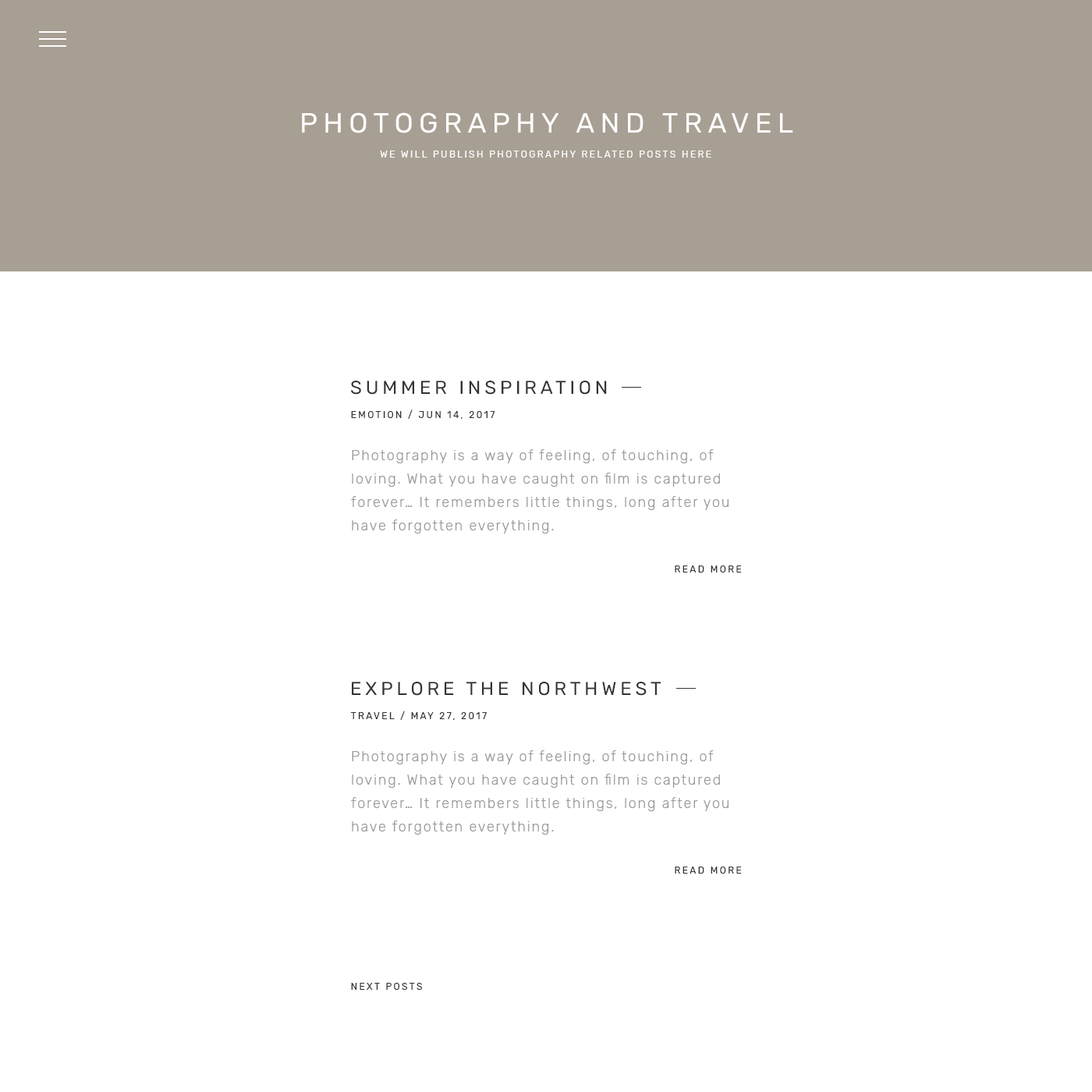
<style>
.page{position:relative;width:1092px;height:1092px;background:#ffffff}
.page>*{position:absolute;margin:0}
.t1{font:28.1px "Rubik-Regular";letter-spacing:0.2em;color:#fffefe;text-transform:uppercase}
.t2{font:9.4px "Rubik-Regular";letter-spacing:0.2em;color:#ffffff;text-transform:uppercase}
.t3{font:18.7px "Rubik-Regular";letter-spacing:0.2em;color:#333333;text-transform:uppercase}
.t4{font:9.4px "Rubik-Regular";letter-spacing:0.2em;color:#333333;text-transform:uppercase}
.t5{font:14px/23.4px "Rubik-Light";letter-spacing:0.1em;color:#999999}
</style>
<div class="page">
<p class="t1" style="left:302px;top:112px;width:491px;height:21px">Photography and Travel</p>
<p class="t2" style="left:380px;top:151px;width:331px;height:7px">We will Publish photography related posts here</p>
<p class="t3" style="left:351px;top:381px;width:256px;height:14px">Summer Inspiration</p>
<p class="t4" style="left:351px;top:409px;width:144px;height:10px">Emotion / Jun 14, 2017</p>
<p class="t5" style="left:351px;top:449px;width:378px;height:85px">Photography is a way of feeling, of touching, of loving. What you have caught on film is captured forever… It remembers little things, long after you have forgotten everything.</p>
<p class="t4" style="left:675px;top:565px;width:67px;height:8px">Read MORE</p>
<p class="t3" style="left:352px;top:682px;width:309px;height:14px">Explore The NortHwest</p>
<p class="t4" style="left:350px;top:711px;width:137px;height:9px">Travel / May 27, 2017</p>
<p class="t5" style="left:351px;top:750px;width:378px;height:85px">Photography is a way of feeling, of touching, of loving. What you have caught on film is captured forever… It remembers little things, long after you have forgotten everything.</p>
<p class="t4" style="left:675px;top:867px;width:67px;height:7px">Read MORE</p>
<p class="t4" style="left:351px;top:983px;width:71px;height:7px">Next Posts</p>
</div>
